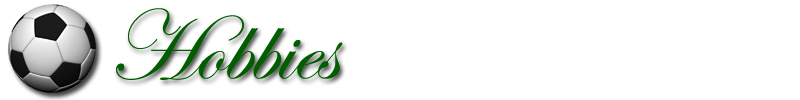
<style>
.page{position:relative;width:800px;height:100px;background:#ffffff}
.page>*{position:absolute;margin:0}
.t1{font:100px "EdwardianScriptITC";color:#025c00}
</style>
<div class="page">
<p class="t1" style="left:116px;top:8px;width:227px;height:72px">Hobbies</p>
</div>
